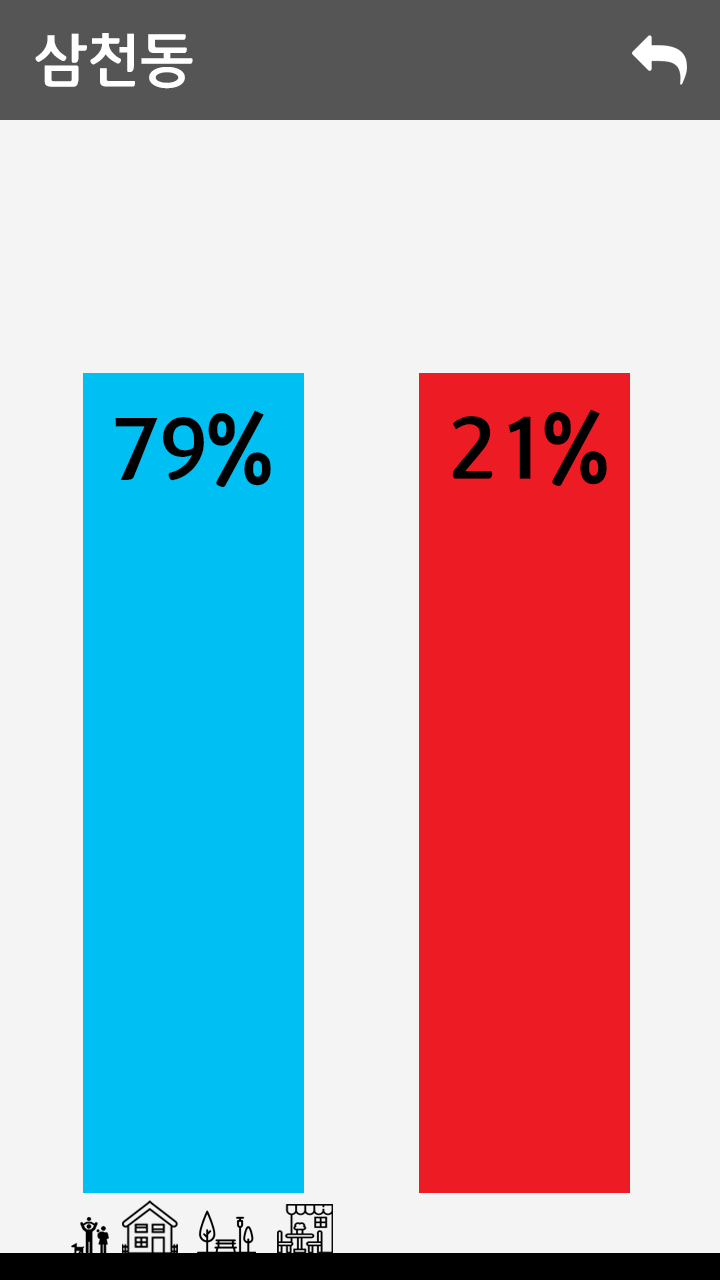
<style>
.page{position:relative;width:720px;height:1280px;background:#f4f4f4}
.page>*{position:absolute;margin:0}
.t1{font:60px "12LotteMartDreamBold";color:#ffffff}
.t2{font:89px "12LotteMartDreamBold";color:#000000}
</style>
<div class="page">
<p class="t1" style="left:35px;top:33px;width:158px;height:56px">삼천동</p>
<p class="t2" style="left:115px;top:410px;width:156px;height:77px">79%</p>
<p class="t2" style="left:452px;top:409px;width:155px;height:77px">21%</p>
</div>
